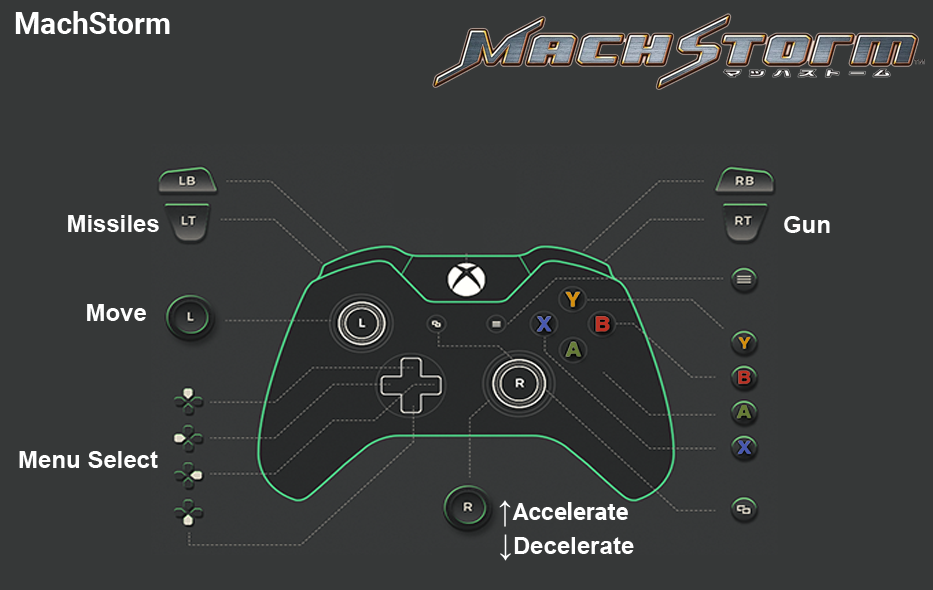
<style>
.page{position:relative;width:933px;height:590px;background:#363838}
.page>*{position:absolute;margin:0}
.t1{font:30px "Roboto-Bold";color:#ffffff}
.t2{font:24px "Arial-BoldMT";color:#fefefe}
.t3{font:24px "Roboto-Bold";color:#fefefe}
.t4{font:30px "ArialMT";color:#fefefe}
.t5{font:30px "Arial-BoldMT";color:#fefefe}
</style>
<div class="page">
<p class="t1" style="left:15px;top:11px;width:155px;height:23px">MachStorm</p>
<p class="t2" style="left:68px;top:215px;width:91px;height:17px">Missiles</p>
<p class="t2" style="left:784px;top:216px;width:46px;height:17px">Gun</p>
<p class="t2" style="left:87px;top:304px;width:59px;height:17px">Move</p>
<p class="t2" style="left:19px;top:451px;width:139px;height:17px">Menu Select</p>
<p class="t3" style="left:499px;top:500px;width:129px;height:27px"><span class="t4">↑</span>Accelerate</p>
<p class="t2" style="left:500px;top:534px;width:134px;height:27px"><span class="t5">↓</span>Decelerate</p>
</div>
